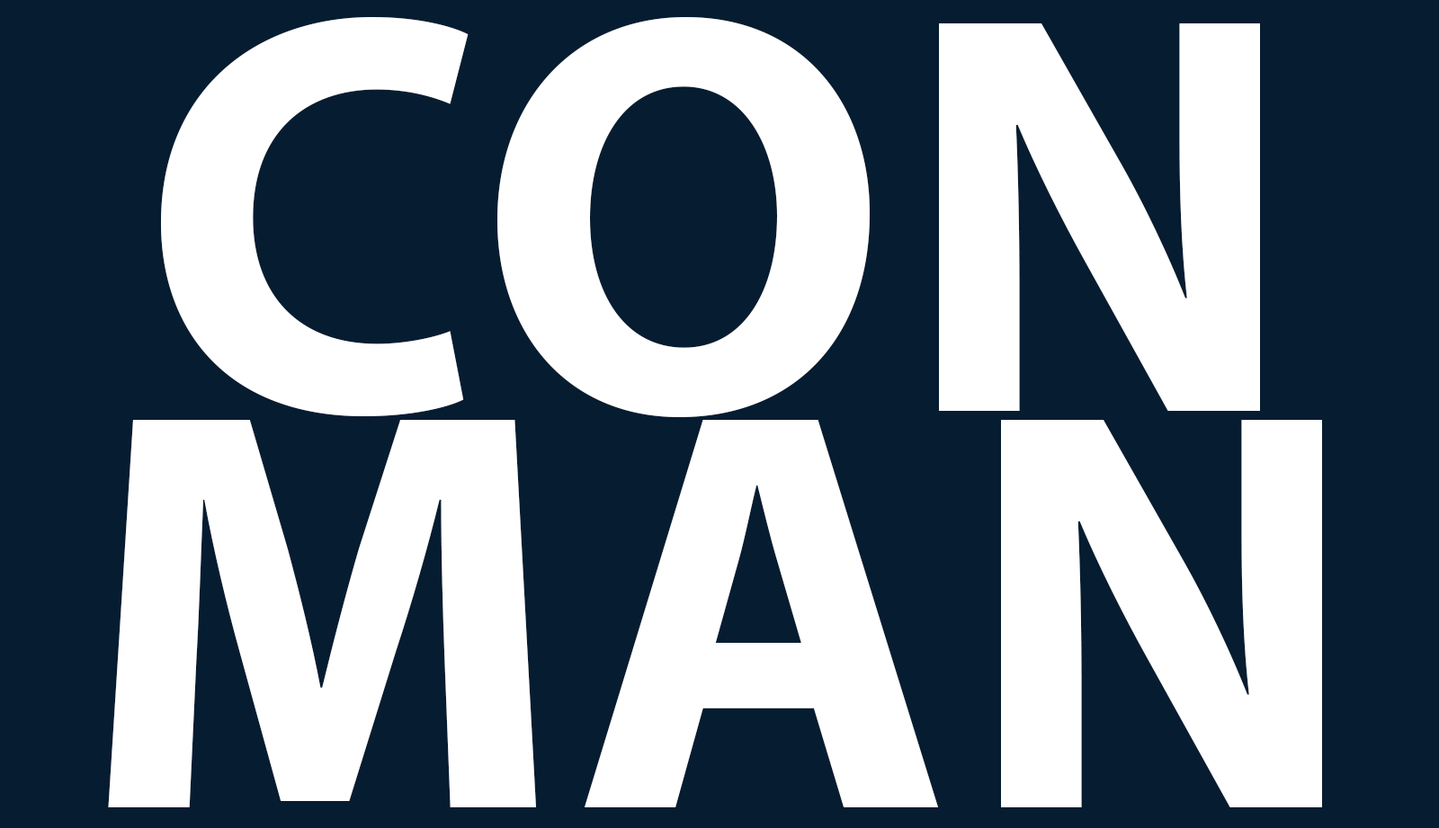
<style>
.page{position:relative;width:1439px;height:828px;background:#061c31}
.page>*{position:absolute;margin:0}
.t1{font:574.8px/396.7px "MyriadPro-Bold";color:#ffffff;text-transform:uppercase}
</style>
<div class="page">
<p class="t1" style="left:108px;top:17px;width:1214px;height:791px;text-align:center">CON<br>MAN</p>
</div>
